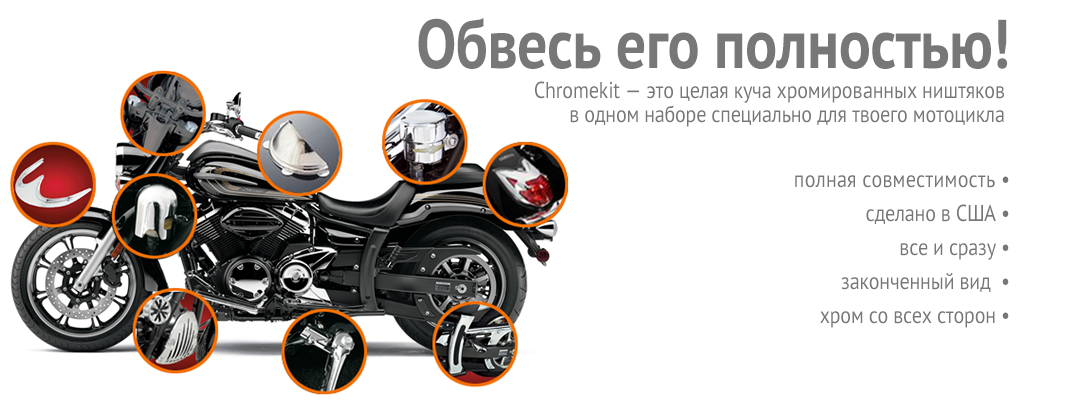
<style>
.page{position:relative;width:1067px;height:400px;background:#ffffff}
.page>*{position:absolute;margin:0}
.t1{font:23px/34px "PTSans-Regular";letter-spacing:-0.01em;color:#777777;scale:0.87 1}
.t2{font:69px/24px "PTSans-Bold";letter-spacing:-0.01em;color:#777777;scale:0.87 1}
.t3{font:23px/15px "PTSans-Regular";letter-spacing:-0.01em;color:#777777;scale:0.87 1}
.t4{font:23px/24px "PTSans-Regular";letter-spacing:-0.01em;color:#777777;scale:0.87 1}
.t5{font:23px/34px "PTSans-Regular";letter-spacing:0.01em;color:#777777;scale:0.87 1}
</style>
<div class="page">
<p class="t1" style="left:418px;top:17px;width:591px;height:311px;text-align:right"><span class="t2">Обвесь его полностью!<br></span><span class="t3"><br>Chromekit — это целая куча хромированных ништяков <br></span><span class="t4">в одном наборе специально для твоего мотоцикла <br><br></span><span class="t5">полная совместимость </span>•<br>сделано в США •<br>все и сразу •<br>законченный вид  •<br>хром со всех сторон •</p>
</div>
